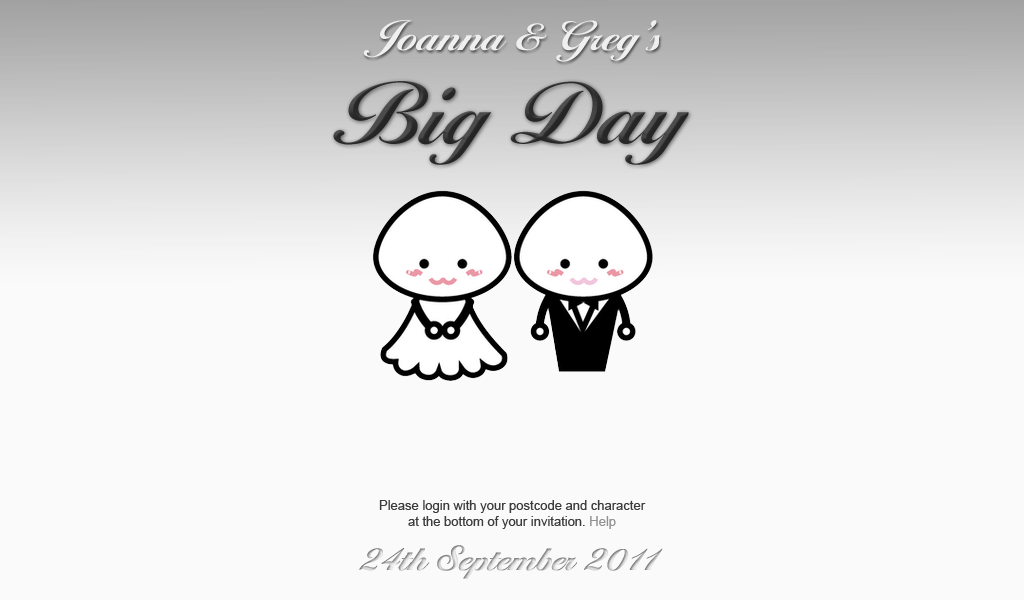
<style>
.page{position:relative;width:1024px;height:600px;background:#fafafa}
.page>*{position:absolute;margin:0}
.t1{font:44px "BallantinesScriptEFBold";color:#f0f0f0}
.t2{font:92px "BallantinesScriptEFBold";color:#2c2c2c}
.t3{font:13px "ArialMT";color:#3c3c3c}
.t4{font:13px "ArialMT";color:#919191}
.t5{font:36px "BallantinesScriptEFBold"}
.t6{font:36px "BallantinesScriptEFBold";letter-spacing:-0.01em}
.t7{font:36px "BallantinesScriptEFBold";letter-spacing:-0.15em}
.t8{font:36px "BallantinesScriptEFBold";letter-spacing:-0.075em}
</style>
<div class="page">
<p class="t1" style="left:363px;top:20px;width:297px;height:42px">Joanna &amp; Greg’s</p>
<p class="t2" style="left:333px;top:81px;width:356px;height:84px">Big Day</p>
<p class="t3" style="left:379px;top:500px;width:267px;height:29px;text-align:center">Please login with your postcode and character<br>at the bottom of your invitation. <span class="t4">Help</span></p>
<p class="t5" style="left:359px;top:545px;width:304px;height:34px">24th September 2<span class="t6">0</span><span class="t7">1</span><span class="t8">1</span></p>
</div>
